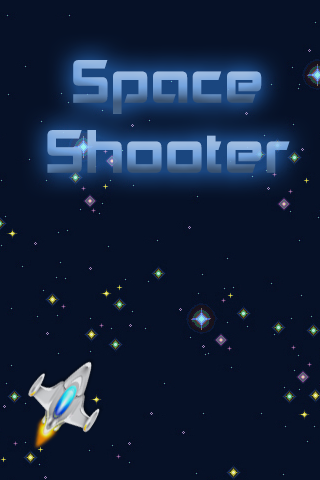
<style>
.page{position:relative;width:320px;height:480px;background:#061127}
.page>*{position:absolute;margin:0}
.t1{font:58.3px "Akashi"}
</style>
<div class="page">
<p class="t1" style="left:47px;top:60px;width:243px;height:113px;text-align:center">Space <br>Shooter</p>
</div>
